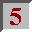
<style>
.page{position:relative;width:32px;height:32px;background:#bbbbbb}
.page>*{position:absolute;margin:0}
.t1{font:25px "TimesNewRomanPS-BoldMT";color:#950101}
</style>
<div class="page">
<p class="t1" style="left:10px;top:8px;width:11px;height:17px">5</p>
</div>
